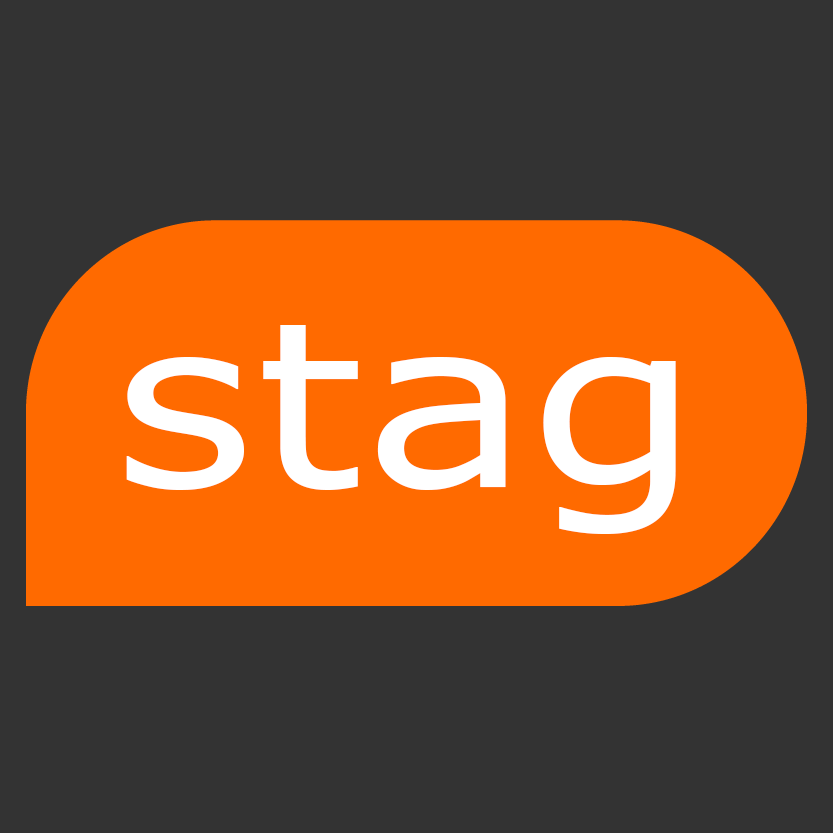
<style>
.page{position:relative;width:833px;height:833px;background:#333333}
.page>*{position:absolute;margin:0}
.t1{font:230.6px "Verdana";color:#ffffff;scale:1.19 1}
</style>
<div class="page">
<p class="t1" style="left:126px;top:325px;width:550px;height:209px">stag</p>
</div>
